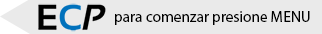
<style>
.page{position:relative;width:322px;height:34px;background:#eaeaea}
.page>*{position:absolute;margin:0}
.t1{font:15.3px "MyriadPro-Regular";color:#000000}
</style>
<div class="page">
<p class="t1" style="left:115px;top:11px;width:195px;height:14px">para comenzar presione MENU</p>
</div>
